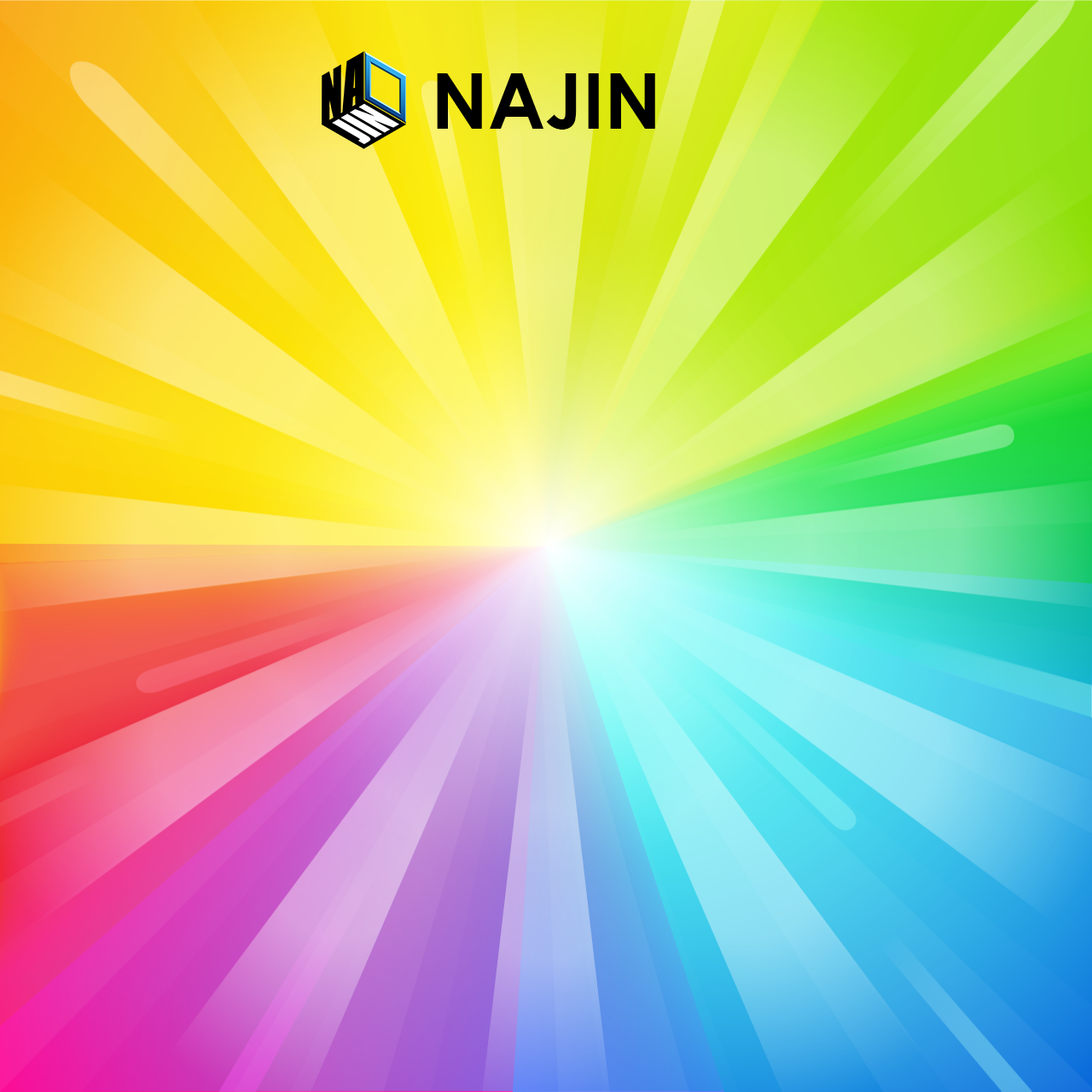
<style>
.page{position:relative;width:1092px;height:1092px}
.page>*{position:absolute;margin:0}
.t1{font:77.4px "CenturyGothic-Bold";color:#000000}
</style>
<div class="page">
<p class="t1" style="left:437px;top:73px;width:218px;height:57px">NAJIN</p>
</div>
